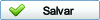
<style>
.page{position:relative;width:100px;height:20px;background:#ffffff}
.page>*{position:absolute;margin:0}
.t1{font:11.1px "ArialMT";color:#060808}
</style>
<div class="page">
<p class="t1" style="left:43px;top:6px;width:31px;height:9px">Salvar</p>
</div>
